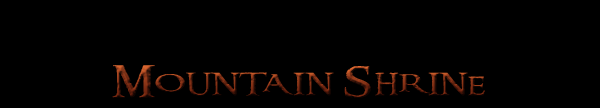
<style>
.page{position:relative;width:600px;height:108px;background:#000000}
.page>*{position:absolute;margin:0}
.t1{font:31.1px "RingbearerMedium";letter-spacing:0.04em;font-variant:small-caps;scale:1.55 1}
</style>
<div class="page">
<p class="t1" style="left:112px;top:65px;width:373px;height:33px">Mountain Shrine</p>
</div>
